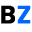
<style>
.page{position:relative;width:32px;height:32px;background:#ffffff}
.page>*{position:absolute;margin:0}
.t1{font:24.8px "Poppins-SemiBold";color:#000000;text-transform:uppercase;font-weight:bold}
.t2{font:24.8px "Poppins-SemiBold";color:#0066ff;text-transform:uppercase;font-weight:bold}
</style>
<div class="page">
<p class="t1" style="left:1px;top:5px;width:14px;height:19px">b</p>
<p class="t2" style="left:17px;top:5px;width:14px;height:19px">z</p>
</div>
